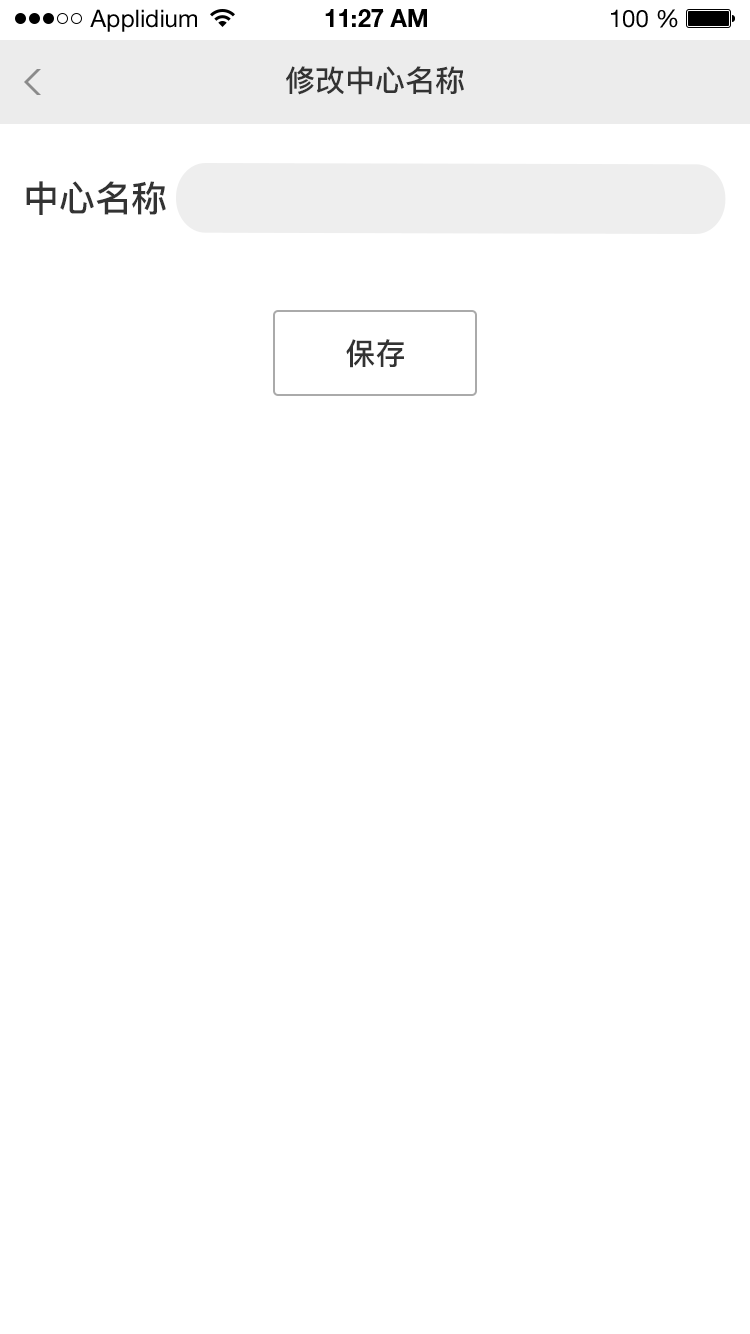
<style>
.page{position:relative;width:750px;height:1334px;background:#ffffff}
.page>*{position:absolute;margin:0}
.t1{font:24px "HelveticaNeueLTStd-Roman";color:#000000}
.t2{font:24px "HelveticaNeueLTStd-Bd";color:#000000}
.t3{font:30px "PingFang-SC-Bold";color:#333333}
.t4{font:36px "PingFang-SC-Bold";color:#333333}
</style>
<div class="page">
<p class="t1" style="left:90px;top:9px;width:107px;height:23px">Applidium</p>
<p class="t2" style="left:325px;top:9px;width:102px;height:18px">11:27 AM</p>
<p class="t1" style="left:611px;top:9px;width:67px;height:19px">100 %</p>
<p class="t3" style="left:286px;top:66px;width:178px;height:29px">修改中心名称</p>
<p class="t4" style="left:26px;top:181px;width:140px;height:34px">中心名称</p>
<p class="t3" style="left:346px;top:339px;width:58px;height:29px">保存</p>
</div>
